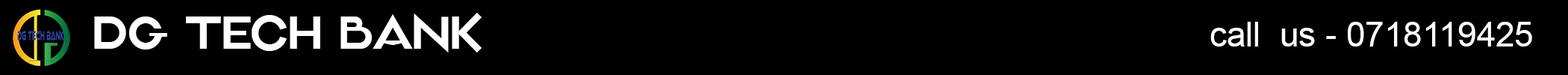
<style>
.page{position:relative;width:1568px;height:75px;background:#000000}
.page>*{position:absolute;margin:0}
.t1{font:46.2px "AlimentPERSONALUSE-Light";color:#ffffff}
.t2{font:34.1px "ArialMT";color:#ffffff}
</style>
<div class="page">
<p class="t1" style="left:94px;top:13px;width:388px;height:39px">DG Tech bank</p>
<p class="t2" style="left:1210px;top:22px;width:322px;height:24px">call  us - 0718119425</p>
</div>
